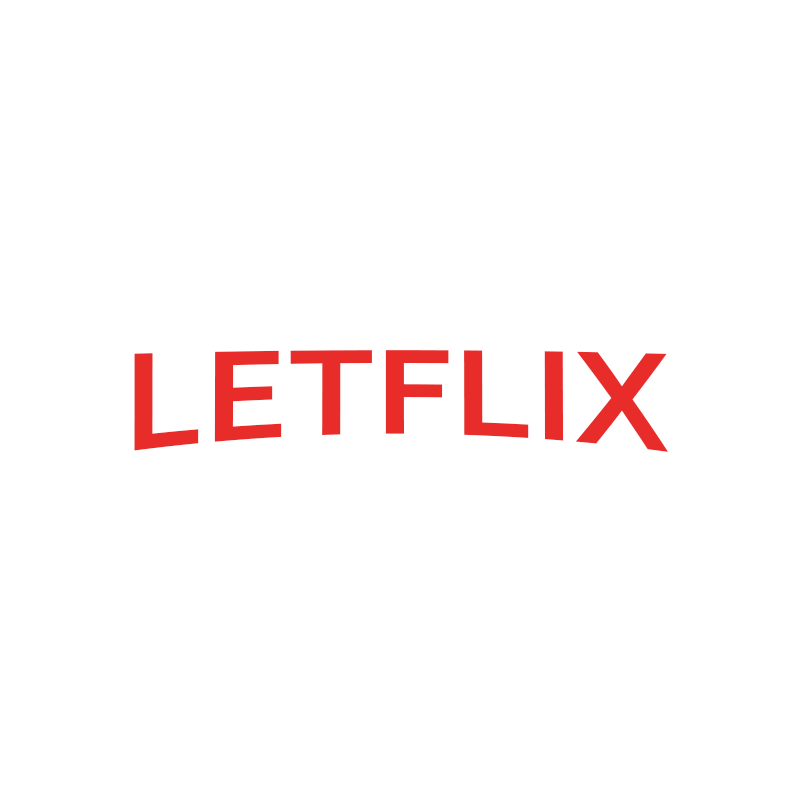
<style>
.page{position:relative;width:800px;height:800px;background:#ffffff}
.page>*{position:absolute;margin:0}
.t1{font:150px "Corbel-Bold";color:#e82c2a}
</style>
<div class="page">
<p class="t1" style="left:134px;top:350px;width:534px;height:102px">LETFLIX</p>
</div>
